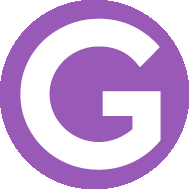
<style>
.page{position:relative;width:189px;height:189px;background:#ffffff}
.page>*{position:absolute;margin:0}
.t1{font:180.5px "KeepCalm-Medium";color:#ffffff;font-weight:bold}
</style>
<div class="page">
<p class="t1" style="left:20px;top:18px;width:141px;height:152px">G</p>
</div>
